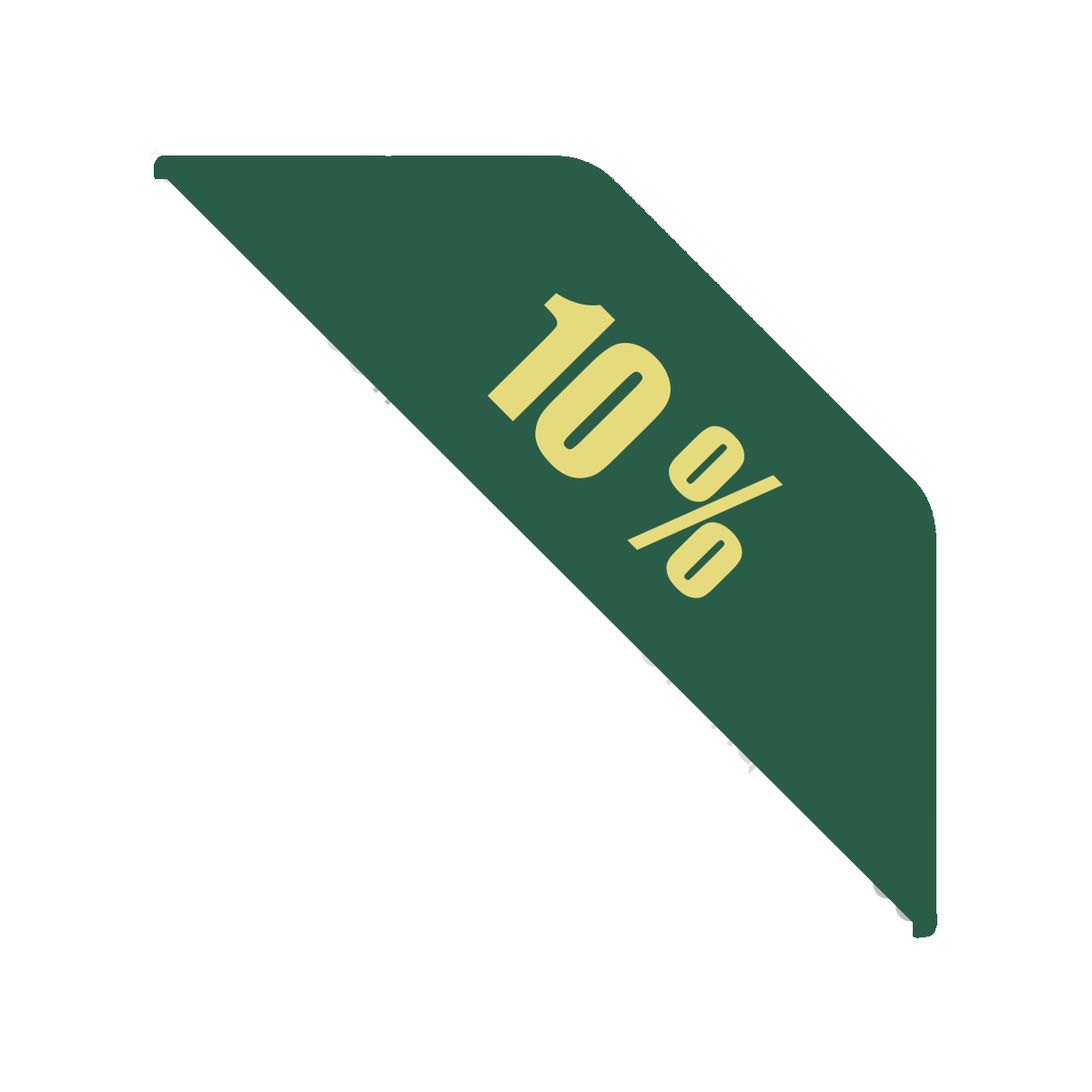
<style>
.page{position:relative;width:1092px;height:1092px;background:#ffffff}
.page>*{position:absolute;margin:0}
.t1{font:181.9px "Impact";color:#e6db7c}
</style>
<div class="page">
<p class="t1" style="left:487px;top:293px;width:296px;height:306px;rotate:45deg">10 %</p>
</div>
